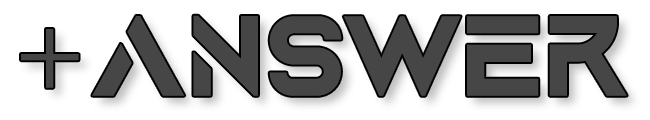
<style>
.page{position:relative;width:650px;height:120px;background:#ffffff}
.page>*{position:absolute;margin:0}
.t1{font:120px "AquireBold";color:#464646}
.t2{font:40px "Arial-Black";color:#0078a5}
.t3{font:120px "MinionPro-Regular";color:#464646}
</style>
<div class="page">
<p class="t1" style="left:92px;top:15px;width:535px;height:81px"><span class="t2"> <br></span>ANSWER</p>
<p class="t3" style="left:21px;top:29px;width:58px;height:59px"><span class="t2"> <br></span>+</p>
</div>
